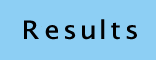
<style>
.page{position:relative;width:156px;height:60px;background:#8dcff4}
.page>*{position:absolute;margin:0}
.t1{font:25px "LucidaSansUnicode";letter-spacing:0.26em;color:#000000;scale:1.11 1}
</style>
<div class="page">
<p class="t1" style="left:24px;top:19px;width:113px;height:21px">Results</p>
</div>
